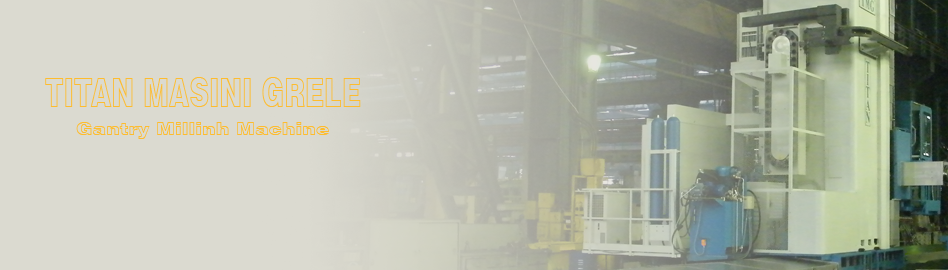
<style>
.page{position:relative;width:948px;height:270px;background:#dbdad0}
.page>*{position:absolute;margin:0}
.t1{font:40.4px "Swiss721BT-BlackOutline";color:#febc2d;scale:0.68 1}
.t2{font:17.6px "Swiss721BT-BlackOutline";color:#febc2d;scale:1.14 1}
</style>
<div class="page">
<p class="t1" style="left:45px;top:77px;width:316px;height:30px">TITAN MASINI GRELE</p>
<p class="t2" style="left:76px;top:122px;width:253px;height:17px">Gantry Millinh Machine</p>
</div>
